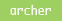
<style>
.page{position:relative;width:62px;height:21px;background:#9dd060}
.page>*{position:absolute;margin:0}
.t1{font:12px "Monaco";color:#ffffff}
</style>
<div class="page">
<p class="t1" style="left:11px;top:5px;width:40px;height:10px">archer</p>
</div>
